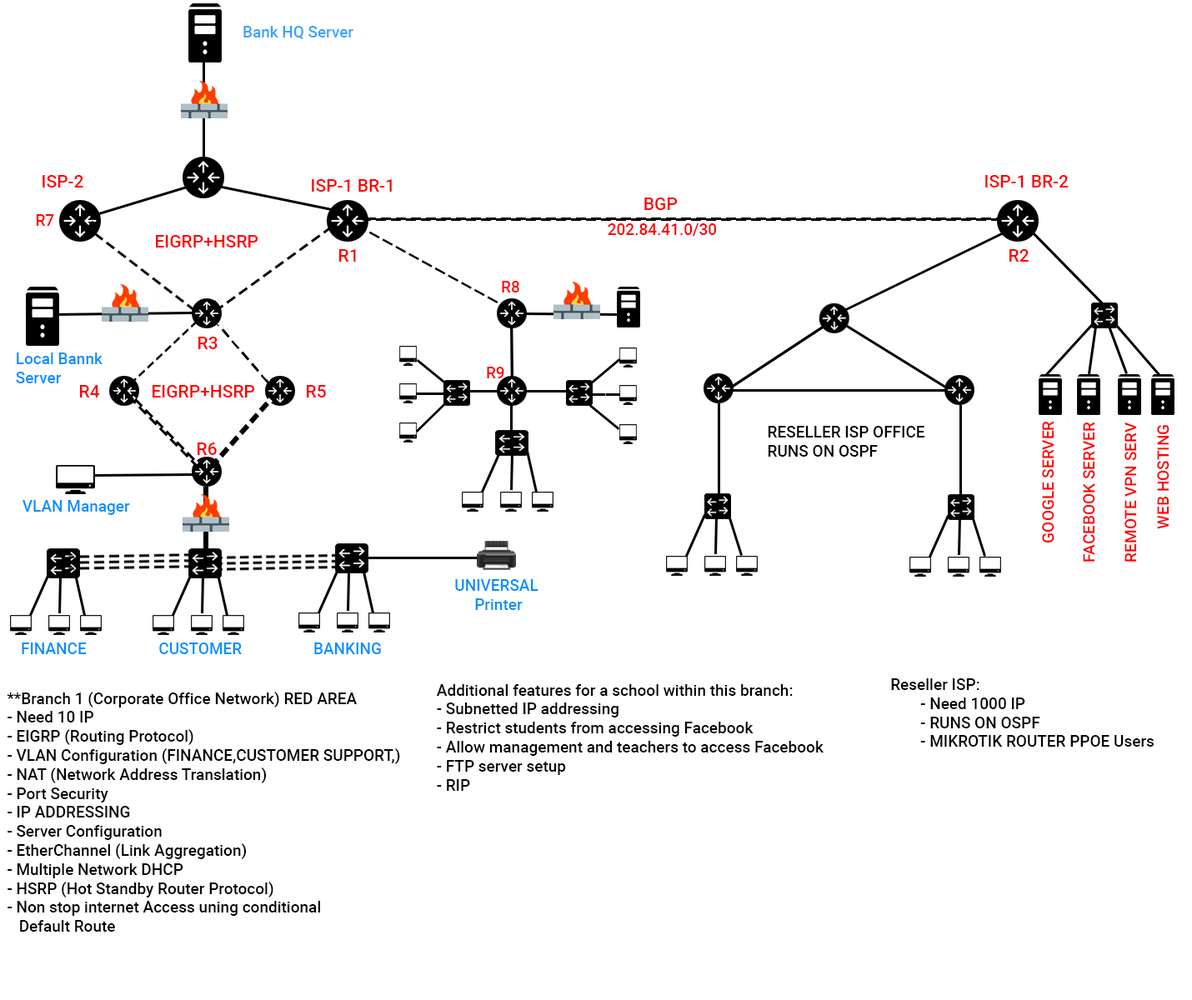
<style>
.page{position:relative;width:1192px;height:1000px;background:#ffffff}
.page>*{position:absolute;margin:0}
.t1{font:15.5px "Roboto-Medium";color:#38a4ff}
.t2{font:17.5px "Roboto-Medium";color:#ff0000}
.t3{font:15.8px "Roboto-Medium";color:#ff0000}
.t4{font:15.8px "Roboto-Medium";color:#0190ff}
.t5{font:15.8px "Roboto-Medium";color:#000000}
</style>
<div class="page">
<p class="t1" style="left:243px;top:26px;width:110px;height:13px">Bank HQ Server</p>
<p class="t2" style="left:43px;top:175px;width:40px;height:13px">ISP-2</p>
<p class="t2" style="left:312px;top:179px;width:80px;height:13px">ISP-1 BR-1</p>
<p class="t2" style="left:985px;top:175px;width:84px;height:13px">ISP-1 BR-2</p>
<p class="t2" style="left:644px;top:198px;width:34px;height:12px">BGP</p>
<p class="t3" style="left:36px;top:214px;width:18px;height:12px">R7</p>
<p class="t3" style="left:608px;top:223px;width:109px;height:13px">202.84.41.0/30</p>
<p class="t2" style="left:156px;top:235px;width:102px;height:13px">EIGRP+HSRP</p>
<p class="t2" style="left:339px;top:249px;width:17px;height:13px">R1</p>
<p class="t2" style="left:1009px;top:249px;width:20px;height:13px">R2</p>
<p class="t3" style="left:502px;top:281px;width:17px;height:12px">R8</p>
<p class="t2" style="left:198px;top:337px;width:20px;height:12px">R3</p>
<p class="t4" style="left:16px;top:353px;width:87px;height:30px">Local Bannk <br>Server</p>
<p class="t3" style="left:487px;top:367px;width:17px;height:11px">R9</p>
<p class="t2" style="left:80px;top:385px;width:20px;height:13px">R4</p>
<p class="t2" style="left:153px;top:385px;width:102px;height:13px">EIGRP+HSRP</p>
<p class="t2" style="left:307px;top:385px;width:19px;height:13px">R5</p>
<p class="t5" style="left:768px;top:426px;width:156px;height:31px">RESELLER ISP OFFICE<br>RUNS ON OSPF</p>
<p class="t3" style="left:1042px;top:421px;width:13px;height:122px;rotate:-90deg">GOOGLE SERVER</p>
<p class="t3" style="left:1083px;top:422px;width:12px;height:140px;rotate:-90deg">FACEBOOK SERVER</p>
<p class="t3" style="left:1125px;top:423px;width:12px;height:139px;rotate:-90deg">REMOTE VPN SERV</p>
<p class="t3" style="left:1157px;top:425px;width:13px;height:104px;rotate:-90deg">WEB HOSTING</p>
<p class="t2" style="left:198px;top:443px;width:19px;height:12px">R6</p>
<p class="t4" style="left:22px;top:500px;width:108px;height:15px">VLAN Manager</p>
<p class="t4" style="left:455px;top:579px;width:84px;height:31px;text-align:center">UNIVERSAL<br> Printer</p>
<p class="t4" style="left:22px;top:643px;width:65px;height:11px">FINANCE</p>
<p class="t4" style="left:159px;top:643px;width:83px;height:11px">CUSTOMER</p>
<p class="t4" style="left:314px;top:643px;width:67px;height:11px">BANKING</p>
<p class="t5" style="left:436px;top:684px;width:388px;height:107px">Additional features for a school within this branch:<br>- Subnetted IP addressing<br>- Restrict students from accessing Facebook<br>- Allow management and teachers to access Facebook<br>- FTP server setup<br>- RIP</p>
<p class="t5" style="left:891px;top:679px;width:263px;height:68px">Reseller ISP:<br> - Need 1000 IP<br> - RUNS ON OSPF<br> - MIKROTIK ROUTER PPOE Users</p>
<p class="t5" style="left:7px;top:692px;width:393px;height:240px">**Branch 1 (Corporate Office Network) RED AREA<br>- Need 10 IP<br>- EIGRP (Routing Protocol) <br>- VLAN Configuration (FINANCE,CUSTOMER SUPPORT,)<br>- NAT (Network Address Translation)<br>- Port Security<br>- IP ADDRESSING <br>- Server Configuration<br>- EtherChannel (Link Aggregation)<br>- Multiple Network DHCP<br>- HSRP (Hot Standby Router Protocol)<br>- Non stop internet Access uning conditional<br>   Default Route</p>
</div>
